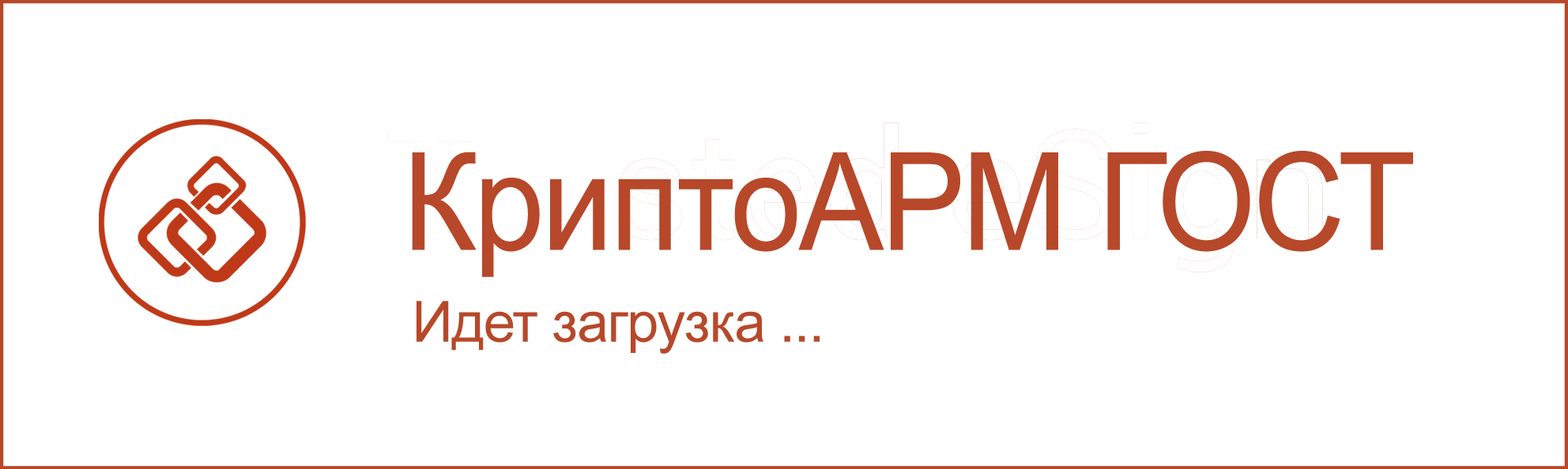
<style>
.page{position:relative;width:1568px;height:469px;background:#ffffff}
.page>*{position:absolute;margin:0}
.t1{font:135.9px "ArialMT";letter-spacing:-0.02em;color:#b7482a;scale:0.93 1}
.t2{font:56.9px "ArialMT";letter-spacing:-0.02em;color:#b7482a}
</style>
<div class="page">
<p class="t1" style="left:412px;top:151px;width:1001px;height:126px">КриптоАРМ ГОСТ</p>
<p class="t2" style="left:416px;top:301px;width:404px;height:53px">Идет загрузка ...</p>
</div>
